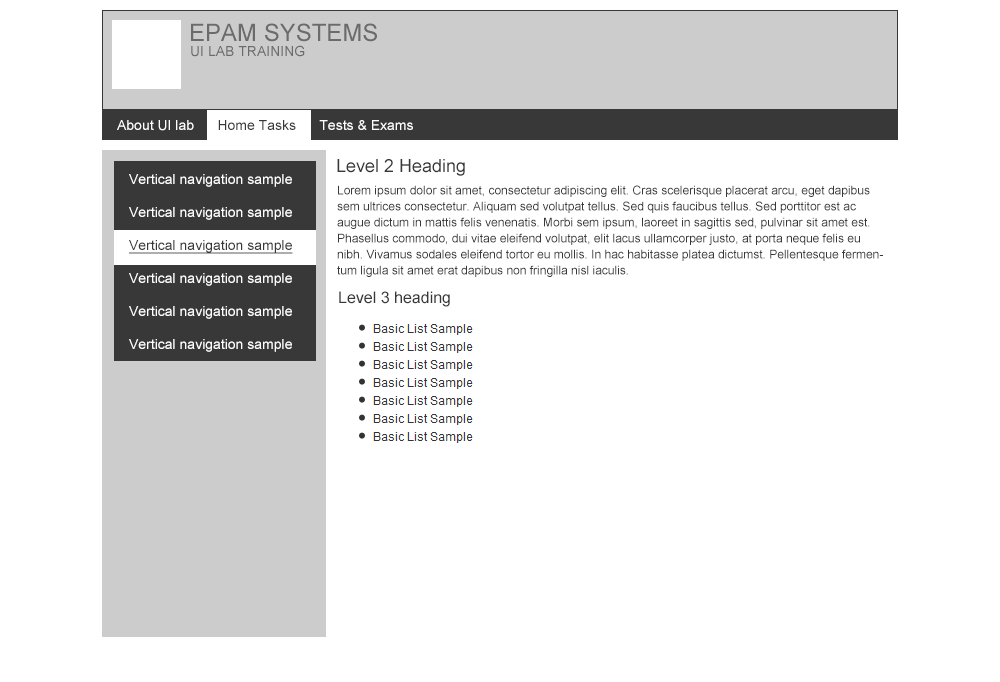
<style>
.page{position:relative;width:1000px;height:682px;background:#ffffff}
.page>*{position:absolute;margin:0}
.t1{font:24px "ArialMT";color:#6b6b6b}
.t2{font:14px "ArialMT";color:#6b6b6b}
.t3{font:18px "ArialMT";color:#383838}
.t4{font:14px/33px "ArialMT";color:#ffffff}
.t5{font:14px/33px "ArialMT";color:#383838;text-decoration:underline}
.t6{font:12px/16px "ArialMT";color:#383838}
.t7{font:16px "ArialMT";color:#383838}
</style>
<div class="page">
<p class="t1" style="left:191px;top:23px;width:186px;height:19px">EPAM SYSTEMS</p>
<p class="t2" style="left:191px;top:45px;width:114px;height:12px">UI LAB TRAINING</p>
<p class="t3" style="left:337px;top:159px;width:128px;height:17px">Level 2 Heading</p>
<p class="t4" style="left:129px;top:174px;width:164px;height:178px">Vertical navigation sample<br>Vertical navigation sample<br><span class="t5">Vertical navigation sample<br></span>Vertical navigation sample<br>Vertical navigation sample<br>Vertical navigation sample</p>
<p class="t6" style="left:337px;top:185px;width:546px;height:92px">Lorem ipsum dolor sit amet, consectetur adipiscing elit. Cras scelerisque placerat arcu, eget dapibus sem ultrices consectetur. Aliquam sed volutpat tellus. Sed quis faucibus tellus. Sed porttitor est ac augue dictum in mattis felis venenatis. Morbi sem ipsum, laoreet in sagittis sed, pulvinar sit amet est. Phasellus commodo, dui vitae eleifend volutpat, elit lacus ullamcorper justo, at porta neque felis eu nibh. Vivamus sodales eleifend tortor eu mollis. In hac habitasse platea dictumst. Pellentesque fermentum ligula sit amet erat dapibus non fringilla nisl iaculis.</p>
<p class="t7" style="left:339px;top:291px;width:111px;height:16px">Level 3 heading</p>
</div>
